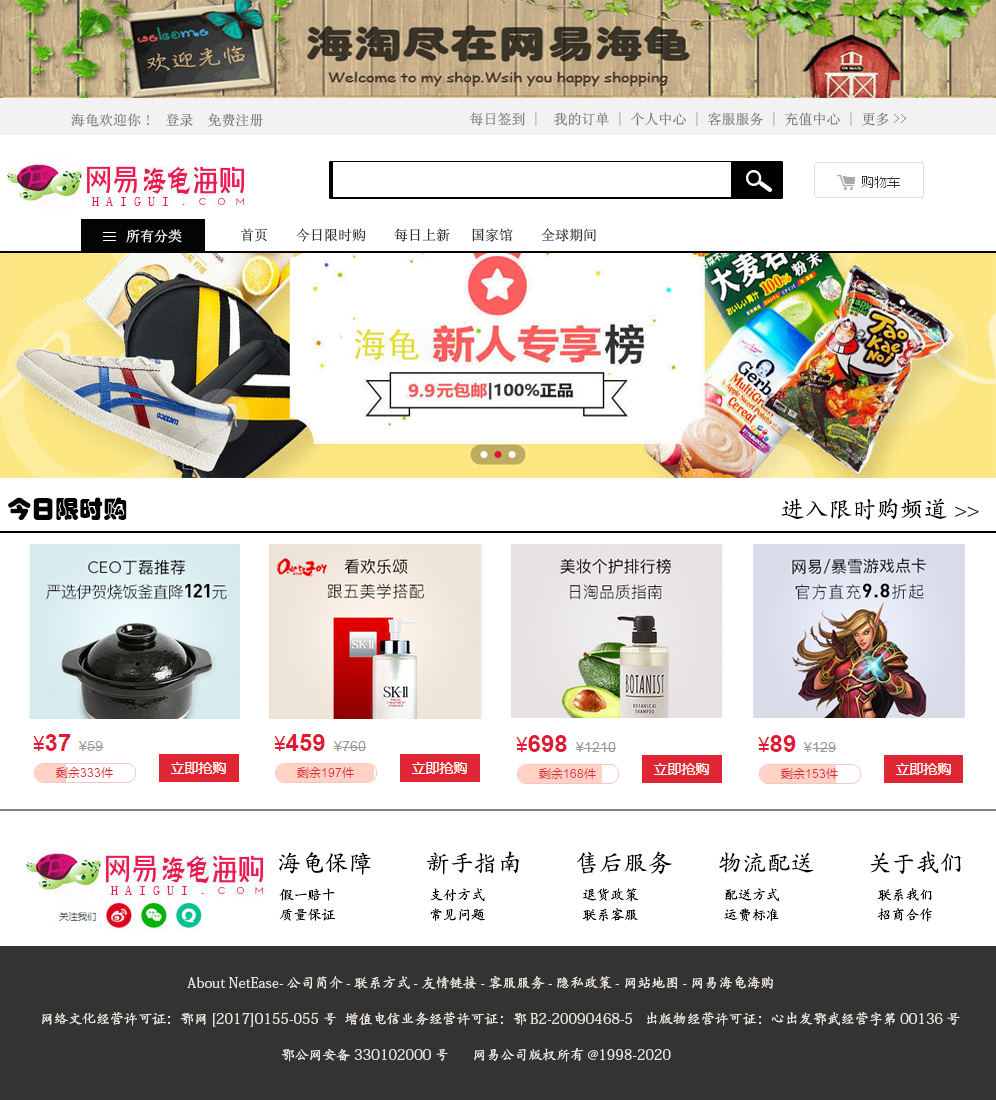
<style>
.page{position:relative;width:996px;height:1100px;background:#ffffff}
.page>*{position:absolute;margin:0}
.t1{font:14px "SimSun";color:#7b7373}
.t2{font:14px "SimSun";color:#ffffff}
.t3{font:14px "SimSun"}
.t4{font:24px "STHupo";color:#020200}
.t5{font:24px "AdobeKaitiStd-Regular";color:#020200}
.t6{font:24px "AdobeKaitiStd-Regular";color:#010101}
.t7{font:14px "AdobeKaitiStd-Regular";color:#000000}
.t8{font:14px "AdobeKaitiStd-Regular";color:#e8e3db}
</style>
<div class="page">
<p class="t1" style="left:71px;top:113px;width:192px;height:14px">海龟欢迎你!  登录  免费注册</p>
<p class="t1" style="left:470px;top:112px;width:437px;height:14px">每日签到 |  我的订单 | 个人中心 | 客服服务 | 充值中心 | 更多&gt;&gt;</p>
<p class="t2" style="left:126px;top:229px;width:56px;height:14px">所有分类</p>
<p class="t3" style="left:241px;top:228px;width:355px;height:14px">首页    今日限时购    每日上新   国家馆    全球期间</p>
<p class="t4" style="left:8px;top:497px;width:119px;height:24px">今日限时购</p>
<p class="t5" style="left:781px;top:498px;width:198px;height:22px">进入限时购频道&gt;&gt;</p>
<p class="t6" style="left:279px;top:851px;width:682px;height:24px">海龟保障        新手指南        售后服务       物流配送        关于我们</p>
<p class="t7" style="left:279px;top:888px;width:653px;height:14px">假一赔十                        支付方式                         退货政策                      配送方式                         联系我们</p>
<p class="t7" style="left:279px;top:908px;width:653px;height:14px">质量保证                        常见问题                         联系客服                      运费标准                         招商合作</p>
<p class="t8" style="left:187px;top:976px;width:586px;height:14px">About NetEase-公司简介-联系方式-友情链接-客服服务-隐私政策-网站地图-网易海龟海购</p>
<p class="t8" style="left:42px;top:1012px;width:918px;height:15px">网络文化经营许可证：鄂网[2017]0155-055号  增值电信业务经营许可证：鄂B2-20090468-5   出版物经营许可证：心出发鄂武经营字第00136号</p>
<p class="t8" style="left:281px;top:1048px;width:390px;height:14px">鄂公网安备330102000号      网易公司版权所有@1998-2020</p>
</div>
